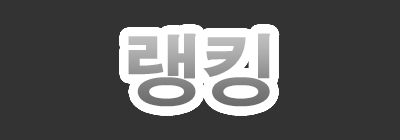
<style>
.page{position:relative;width:400px;height:140px;background:#333333}
.page>*{position:absolute;margin:0}
.t1{font:76.8px "H2gtrE"}
</style>
<div class="page">
<p class="t1" style="left:128px;top:33px;width:142px;height:74px">랭킹</p>
</div>
